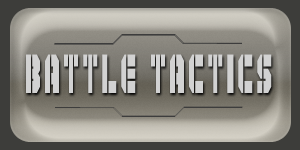
<style>
.page{position:relative;width:300px;height:150px}
.page>*{position:absolute;margin:0}
.t1{font:91.1px "Goshawk-Military-Inverse";letter-spacing:0.1em;color:#d2d2d2;scale:0.51 1}
</style>
<div class="page">
<p class="t1" style="left:26px;top:54px;width:246px;height:39px">BATTLE TACTICS</p>
</div>
